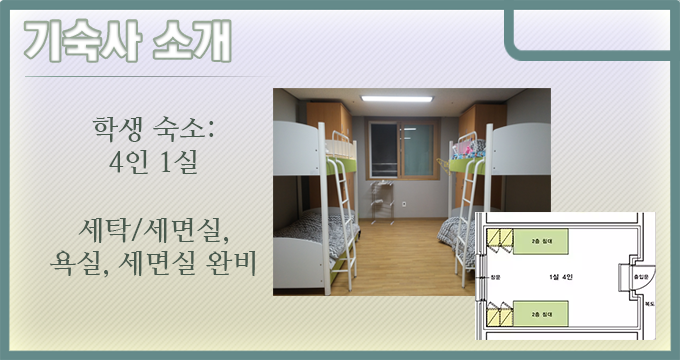
<style>
.page{position:relative;width:680px;height:360px}
.page>*{position:absolute;margin:0}
.t1{font:44px "KoreanTITGD5-R";letter-spacing:-0.01em;color:#ffffff}
.t2{font:28px "NanumMyeongjoBold";letter-spacing:-0.01em;color:#495a4e}
</style>
<div class="page">
<p class="t1" style="left:25px;top:20px;width:205px;height:41px">기숙사 소개</p>
<p class="t2" style="left:49px;top:116px;width:207px;height:162px;text-align:center">학생 숙소:<br>4인 1실<br><br>세탁/세면실,<br>욕실, 세면실 완비</p>
</div>
